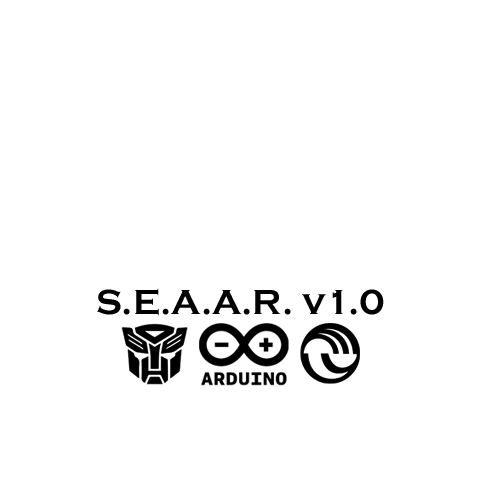
<style>
.page{position:relative;width:500px;height:500px;background:#ffffff}
.page>*{position:absolute;margin:0}
.t1{font:36px "CopperplateGothic-Bold";color:#000000}
</style>
<div class="page">
<p class="t1" style="left:97px;top:288px;width:287px;height:28px">S.E.A.A.R. v1.0</p>
</div>
